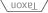
<style>
.page{position:relative;width:48px;height:13px;background:#fefefe}
.page>*{position:absolute;margin:0}
.t1{font:10px "Tahoma";letter-spacing:0.025em;color:#8e8e8e}
</style>
<div class="page">
<p class="t1" style="left:9px;top:0px;width:29px;height:11px;rotate:180deg">Taxon</p>
</div>
